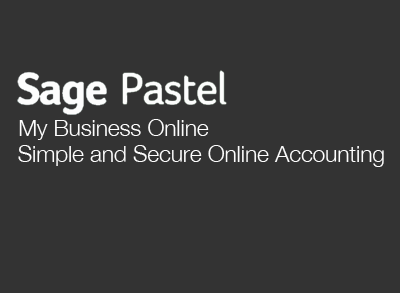
<style>
.page{position:relative;width:400px;height:293px;background:#333333}
.page>*{position:absolute;margin:0}
.t1{font:22.5px "HelveticaNeue-Light";color:#ffffff}
</style>
<div class="page">
<p class="t1" style="left:19px;top:119px;width:190px;height:21px">My Business Online</p>
<p class="t1" style="left:18px;top:145px;width:366px;height:22px">Simple and Secure Online Accounting</p>
</div>
